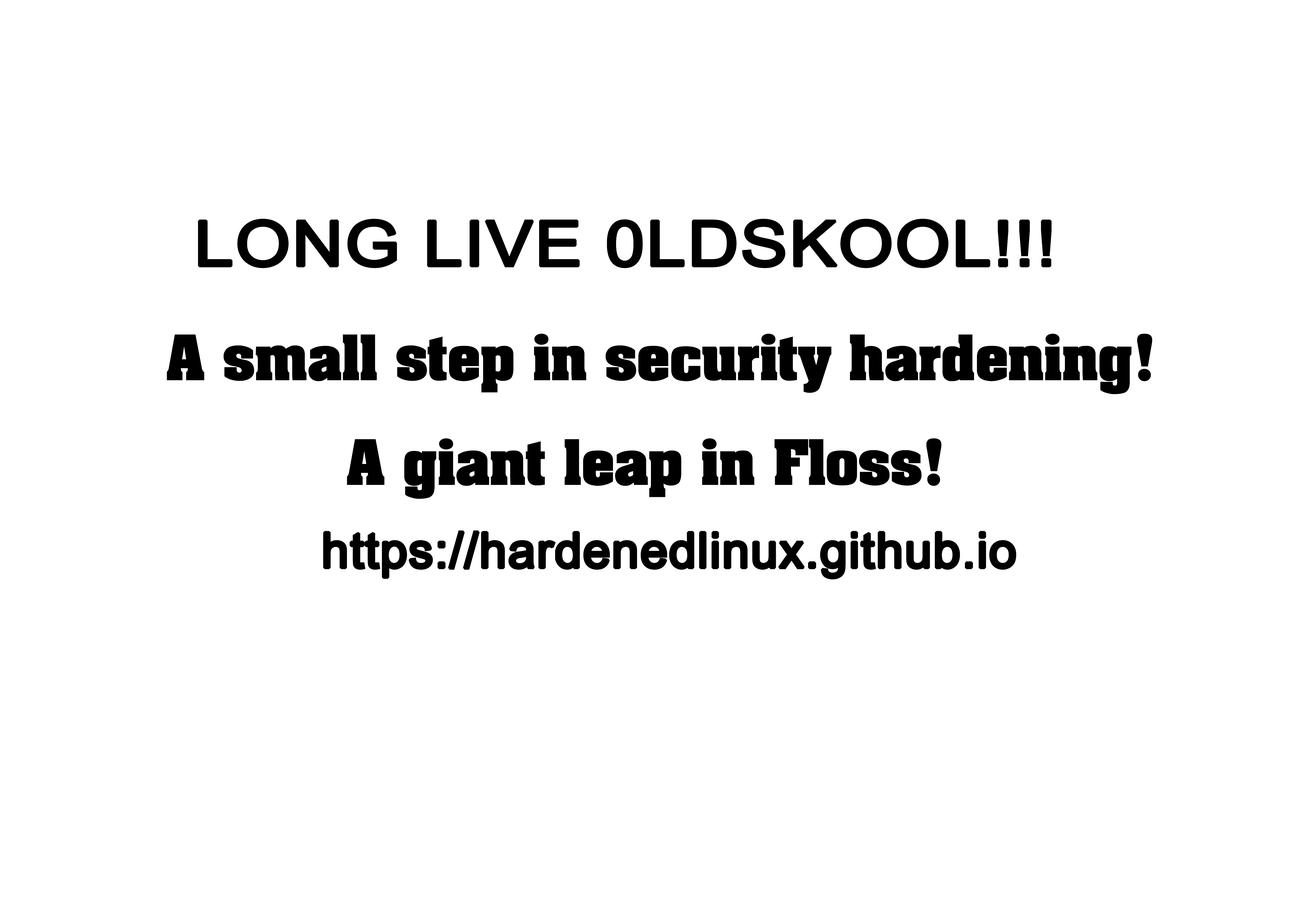
<style>
.page{position:relative;width:1299px;height:918px;background:#ffffff}
.page>*{position:absolute;margin:0}
.t1{font:62.7px "ArialMT";color:#040606;font-weight:bold;scale:1.12 1}
.t2{font:53.1px/52.4px "AardvarkBold";color:#040606}
.t3{font:49.1px "ArialMT";color:#040606;font-weight:bold}
</style>
<div class="page">
<p class="t1" style="left:198px;top:219px;width:853px;height:49px">LONG LIVE 0LDSKOOL!!!</p>
<p class="t2" style="left:167px;top:334px;width:985px;height:165px">A small step in security hardening!<br>          <br>          A giant leap in Floss!</p>
<p class="t3" style="left:323px;top:531px;width:693px;height:49px">https://hardenedlinux.github.io</p>
</div>
